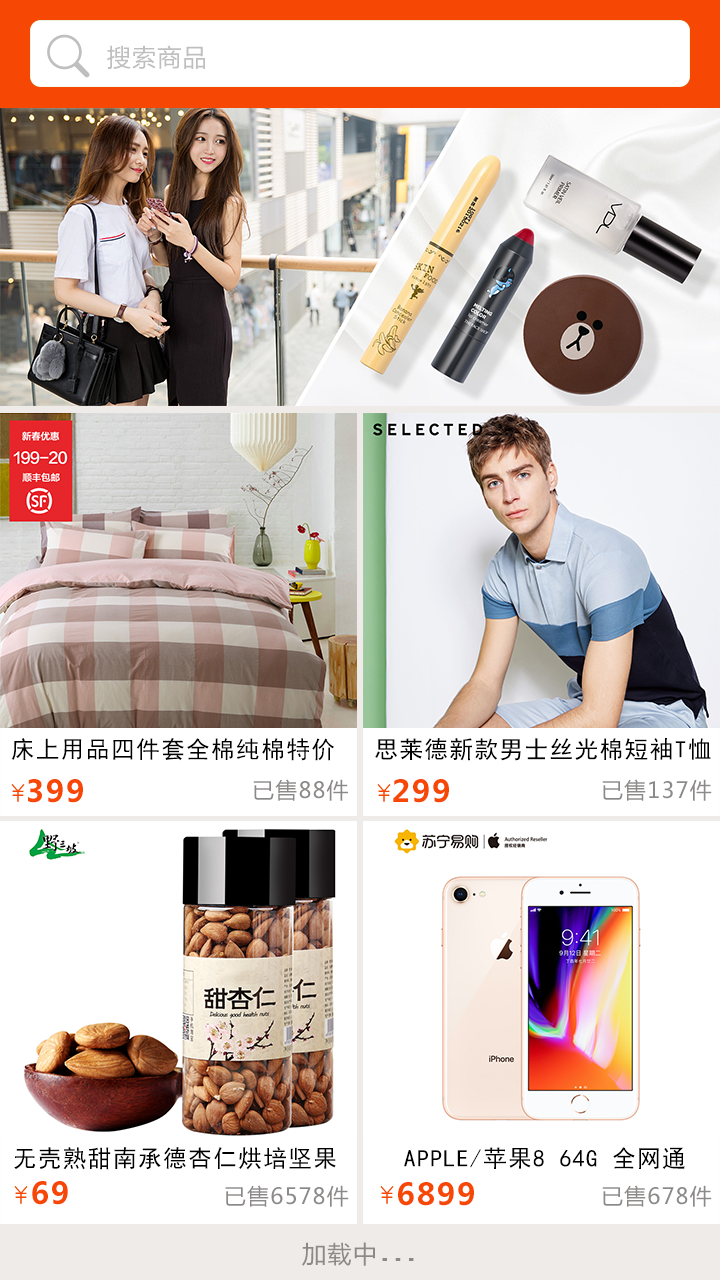
<style>
.page{position:relative;width:720px;height:1280px;background:#ffffff}
.page>*{position:absolute;margin:0}
.t1{font:24px "MicrosoftYaHei";letter-spacing:0.055em;color:#bfbfbf;text-transform:uppercase}
.t2{font:24px "SimHei";letter-spacing:0.055em;color:#000000;text-transform:uppercase}
.t3{font:30px "MicrosoftYaHei-Bold";letter-spacing:0.055em;color:#f64804;text-transform:uppercase}
.t4{font:22px "MicrosoftYaHei";letter-spacing:0.055em;color:#8c8a89;text-transform:uppercase}
.t5{font:24px "MicrosoftYaHei";letter-spacing:0.055em;color:#8c8a89;text-transform:uppercase}
.t6{font:24px "Fixedsys";letter-spacing:0.055em;color:#8c8a89;text-transform:uppercase}
</style>
<div class="page">
<p class="t1" style="left:107px;top:45px;width:98px;height:24px">搜索商品</p>
<p class="t2" style="left:11px;top:738px;width:323px;height:23px">床上用品四件套全棉纯棉特价</p>
<p class="t2" style="left:375px;top:738px;width:336px;height:23px">思莱德新款男士丝光棉短袖T恤</p>
<p class="t3" style="left:28px;top:779px;width:55px;height:24px">399</p>
<p class="t4" style="left:253px;top:779px;width:95px;height:22px">已售88件</p>
<p class="t3" style="left:393px;top:779px;width:56px;height:24px">299</p>
<p class="t4" style="left:602px;top:779px;width:110px;height:22px">已售137件</p>
<p class="t2" style="left:14px;top:1147px;width:322px;height:23px">无壳熟甜南承德杏仁烘培坚果</p>
<p class="t2" style="left:404px;top:1147px;width:281px;height:23px">Apple/苹果8 64G 全网通</p>
<p class="t3" style="left:32px;top:1181px;width:36px;height:24px">69</p>
<p class="t3" style="left:398px;top:1182px;width:76px;height:24px">6899</p>
<p class="t4" style="left:225px;top:1185px;width:124px;height:22px">已售6578件</p>
<p class="t4" style="left:602px;top:1185px;width:110px;height:22px">已售678件</p>
<p class="t5" style="left:302px;top:1242px;width:112px;height:24px">加载中<span class="t6">...</span></p>
</div>
